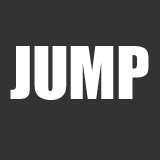
<style>
.page{position:relative;width:160px;height:160px;background:#333333}
.page>*{position:absolute;margin:0}
.t1{font:67px "Impact";color:#ffffff;text-transform:uppercase}
</style>
<div class="page">
<p class="t1" style="left:10px;top:46px;width:139px;height:54px">JUMP</p>
</div>
